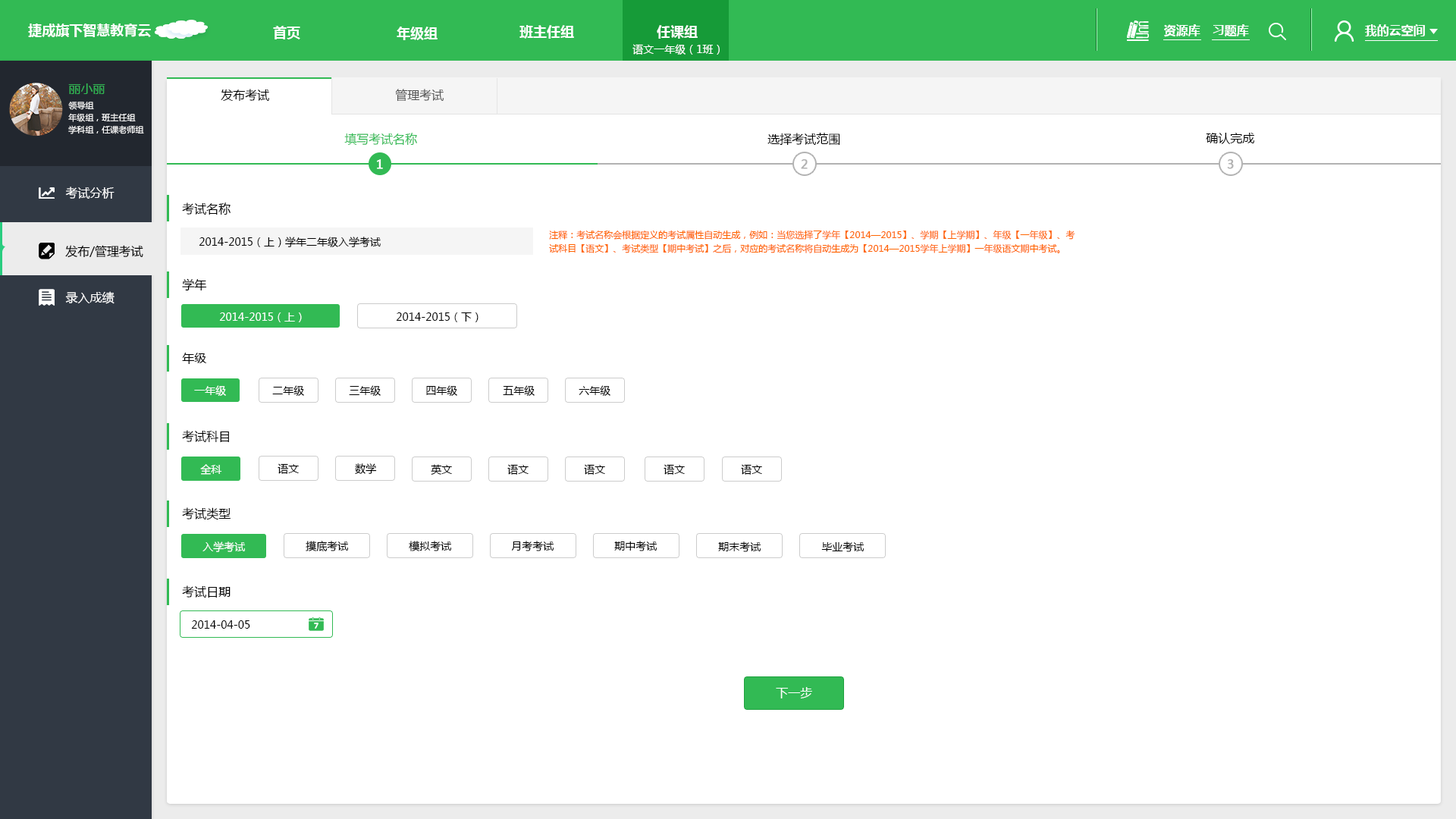
<style>
.page{position:relative;width:1456px;height:819px;background:#ffffff}
.page>*{position:absolute;margin:0}
.t1{font:13.6px "MicrosoftYaHei-Bold";color:#ffffff}
.t2{font:12.1px "MicrosoftYaHei-Bold";color:#ffffff}
.t3{font:10.6px "MicrosoftYaHei";color:#ffffff}
.t4{font:12.1px "MicrosoftYaHei";color:#32ba54}
.t5{font:12.1px "MicrosoftYaHei";color:#000000}
.t6{font:12.1px "MicrosoftYaHei";color:#545454}
.t7{font:8.3px/12.1px "MicrosoftYaHei";color:#ffffff}
.t8{font:12.1px "MicrosoftYaHei";color:#ffffff;font-weight:bold}
.t9{font:12.1px "MicrosoftYaHei";color:#b2b2b2;font-weight:bold}
.t10{font:12.1px "MicrosoftYaHei";color:#ffffff}
.t11{font:9.1px/13.6px "MicrosoftYaHei";color:#ff6600}
.t12{font:10.6px "MicrosoftYaHei";color:#000000}
.t13{font:12.1px "MicrosoftYaHei";color:#fffefe}
</style>
<div class="page">
<p class="t1" style="left:28px;top:24px;width:123px;height:13px">捷成旗下智慧教育云</p>
<p class="t1" style="left:273px;top:26px;width:27px;height:13px">首页</p>
<p class="t1" style="left:397px;top:27px;width:41px;height:13px">年级组</p>
<p class="t1" style="left:519px;top:25px;width:55px;height:14px">班主任组</p>
<p class="t1" style="left:657px;top:25px;width:41px;height:14px">任课组</p>
<p class="t2" style="left:1164px;top:24px;width:36px;height:13px">资源库</p>
<p class="t2" style="left:1213px;top:24px;width:36px;height:13px">习题库</p>
<p class="t2" style="left:1365px;top:24px;width:60px;height:12px">我的云空间</p>
<p class="t3" style="left:632px;top:44px;width:88px;height:11px">语文一年级（1班）</p>
<p class="t4" style="left:68px;top:83px;width:37px;height:11px">丽小丽</p>
<p class="t5" style="left:221px;top:89px;width:48px;height:12px">发布考试</p>
<p class="t6" style="left:395px;top:89px;width:49px;height:13px">管理考试</p>
<p class="t7" style="left:68px;top:102px;width:76px;height:32px">领导组<br>年级组，班主任组<br>学科组，任课老师组</p>
<p class="t4" style="left:344px;top:133px;width:73px;height:13px">填写考试名称</p>
<p class="t5" style="left:767px;top:133px;width:73px;height:13px">选择考试范围</p>
<p class="t5" style="left:1206px;top:133px;width:49px;height:11px">确认完成</p>
<p class="t8" style="left:377px;top:159px;width:6px;height:10px">1</p>
<p class="t9" style="left:801px;top:159px;width:7px;height:10px">2</p>
<p class="t9" style="left:1227px;top:159px;width:7px;height:10px">3</p>
<p class="t10" style="left:65px;top:187px;width:50px;height:12px">考试分析</p>
<p class="t10" style="left:65px;top:187px;width:50px;height:12px">考试分析</p>
<p class="t5" style="left:182px;top:202px;width:49px;height:13px">考试名称</p>
<p class="t11" style="left:549px;top:230px;width:526px;height:23px">注释：考试名称会根据定义的考试属性自动生成，例如：当您选择了学年【2014—2015】、学期【上学期】、年级【一年级】、考<br>试科目【语文】、考试类型【期中考试】之后，对应的考试名称将自动生成为【2014—2015学年上学期】一年级语文期中考试。</p>
<p class="t5" style="left:65px;top:245px;width:78px;height:13px">发布/管理考试</p>
<p class="t12" style="left:199px;top:237px;width:182px;height:10px">2014-2015（上）学年二年级入学考试</p>
<p class="t5" style="left:182px;top:278px;width:25px;height:13px">学年</p>
<p class="t10" style="left:65px;top:291px;width:50px;height:13px">录入成绩</p>
<p class="t10" style="left:65px;top:291px;width:50px;height:13px">录入成绩</p>
<p class="t3" style="left:219px;top:312px;width:83px;height:10px">2014-2015（上）</p>
<p class="t12" style="left:396px;top:312px;width:83px;height:10px">2014-2015（下）</p>
<p class="t5" style="left:182px;top:353px;width:25px;height:11px">年级</p>
<p class="t3" style="left:194px;top:385px;width:32px;height:11px">一年级</p>
<p class="t12" style="left:272px;top:385px;width:32px;height:11px">二年级</p>
<p class="t12" style="left:349px;top:385px;width:32px;height:11px">三年级</p>
<p class="t12" style="left:426px;top:385px;width:31px;height:11px">四年级</p>
<p class="t12" style="left:503px;top:385px;width:32px;height:11px">五年级</p>
<p class="t12" style="left:579px;top:385px;width:31px;height:11px">六年级</p>
<p class="t5" style="left:182px;top:430px;width:47px;height:12px">考试科目</p>
<p class="t3" style="left:200px;top:464px;width:22px;height:11px">全科</p>
<p class="t12" style="left:278px;top:463px;width:21px;height:11px">语文</p>
<p class="t12" style="left:355px;top:463px;width:22px;height:11px">数学</p>
<p class="t12" style="left:431px;top:464px;width:21px;height:11px">英文</p>
<p class="t12" style="left:507px;top:464px;width:22px;height:11px">语文</p>
<p class="t12" style="left:584px;top:464px;width:21px;height:11px">语文</p>
<p class="t12" style="left:664px;top:464px;width:21px;height:11px">语文</p>
<p class="t12" style="left:741px;top:464px;width:21px;height:11px">语文</p>
<p class="t5" style="left:182px;top:507px;width:49px;height:13px">考试类型</p>
<p class="t3" style="left:202px;top:541px;width:43px;height:11px">入学考试</p>
<p class="t12" style="left:306px;top:541px;width:42px;height:10px">摸底考试</p>
<p class="t12" style="left:409px;top:541px;width:42px;height:10px">模拟考试</p>
<p class="t12" style="left:511px;top:541px;width:43px;height:10px">月考考试</p>
<p class="t12" style="left:614px;top:541px;width:43px;height:10px">期中考试</p>
<p class="t12" style="left:718px;top:541px;width:43px;height:11px">期末考试</p>
<p class="t12" style="left:821px;top:541px;width:43px;height:11px">毕业考试</p>
<p class="t5" style="left:182px;top:585px;width:49px;height:13px">考试日期</p>
<p class="t12" style="left:191px;top:620px;width:59px;height:9px">2014-04-05</p>
<p class="t13" style="left:776px;top:687px;width:36px;height:11px">下一步</p>
</div>
